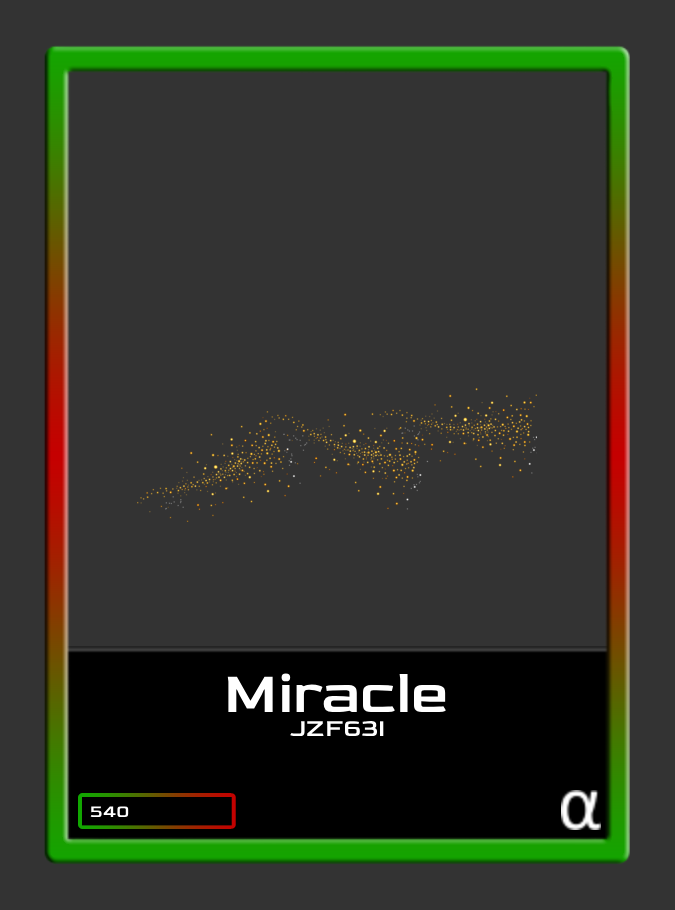
<style>
.page{position:relative;width:675px;height:910px;background:#333333}
.page>*{position:absolute;margin:0}
.t1{font:60px "Goldman-Regular";color:#ffffff}
.t2{font:25px "Goldman-Regular";color:#ffffff}
.t3{font:18px "Goldman-Regular";color:#ffffff}
</style>
<div class="page">
<p class="t1" style="left:227px;top:673px;width:219px;height:39px">Miracle</p>
<p class="t2" style="left:290px;top:721px;width:94px;height:15px">JZF63I</p>
<p class="t3" style="left:90px;top:806px;width:39px;height:11px">540</p>
</div>
